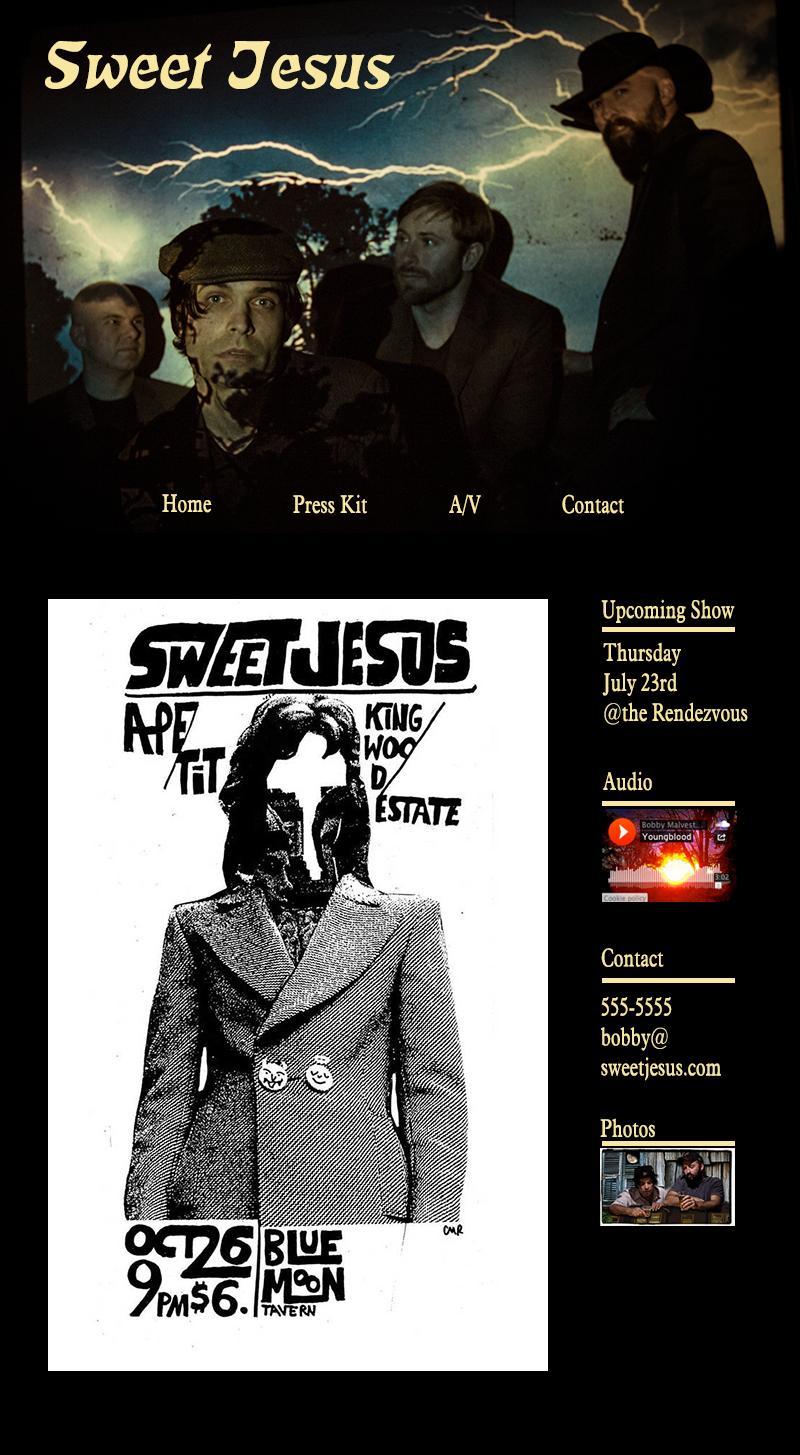
<style>
.page{position:relative;width:800px;height:1455px;background:#000000}
.page>*{position:absolute;margin:0}
.t1{font:66.7px "Jekoto-SemiexpandedItalic";color:#f7e7a0}
.t2{font:25px "NewJackTimes-CondensedRegular";color:#f7e7a0}
.t3{font:25px "NewJackTimes-CondensedRegular";color:#f5e69f}
.t4{font:25px/125px "NewJackTimes-CondensedRegular";color:#f5e69f}
</style>
<div class="page">
<p class="t1" style="left:45px;top:41px;width:350px;height:48px">Sweet Jesus</p>
<p class="t2" style="left:162px;top:494px;width:50px;height:19px">Home</p>
<p class="t2" style="left:293px;top:494px;width:74px;height:20px">Press Kit</p>
<p class="t2" style="left:449px;top:494px;width:32px;height:22px">A/V</p>
<p class="t2" style="left:562px;top:494px;width:62px;height:20px">Contact</p>
<p class="t3" style="left:601px;top:599px;width:134px;height:24px">Upcoming Show</p>
<p class="t3" style="left:602px;top:642px;width:146px;height:83px"><span class="t4">Thursday</span><br>July 23rd<br>@the Rendezvous</p>
<p class="t3" style="left:603px;top:771px;width:49px;height:20px">Audio</p>
<p class="t3" style="left:601px;top:948px;width:63px;height:19px">Contact</p>
<p class="t3" style="left:601px;top:997px;width:120px;height:84px"><span class="t4">555-5555</span><br>bobby@<br>sweetjesus.com</p>
<p class="t3" style="left:600px;top:1118px;width:55px;height:20px">Photos</p>
</div>
